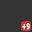
<style>
.page{position:relative;width:32px;height:32px;background:#333333}
.page>*{position:absolute;margin:0}
.t1{font:7.7px "Verdana";color:#ffffff;scale:0.71 1}
</style>
<div class="page">
<p class="t1" style="left:22px;top:23px;width:8px;height:7px">+9</p>
</div>
